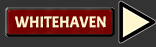
<style>
.page{position:relative;width:156px;height:47px;background:#333333}
.page>*{position:absolute;margin:0}
.t1{font:15.2px "Acme-Regular";color:#fff6cd}
</style>
<div class="page">
<p class="t1" style="left:15px;top:16px;width:91px;height:12px">WHITEHAVEN</p>
</div>
